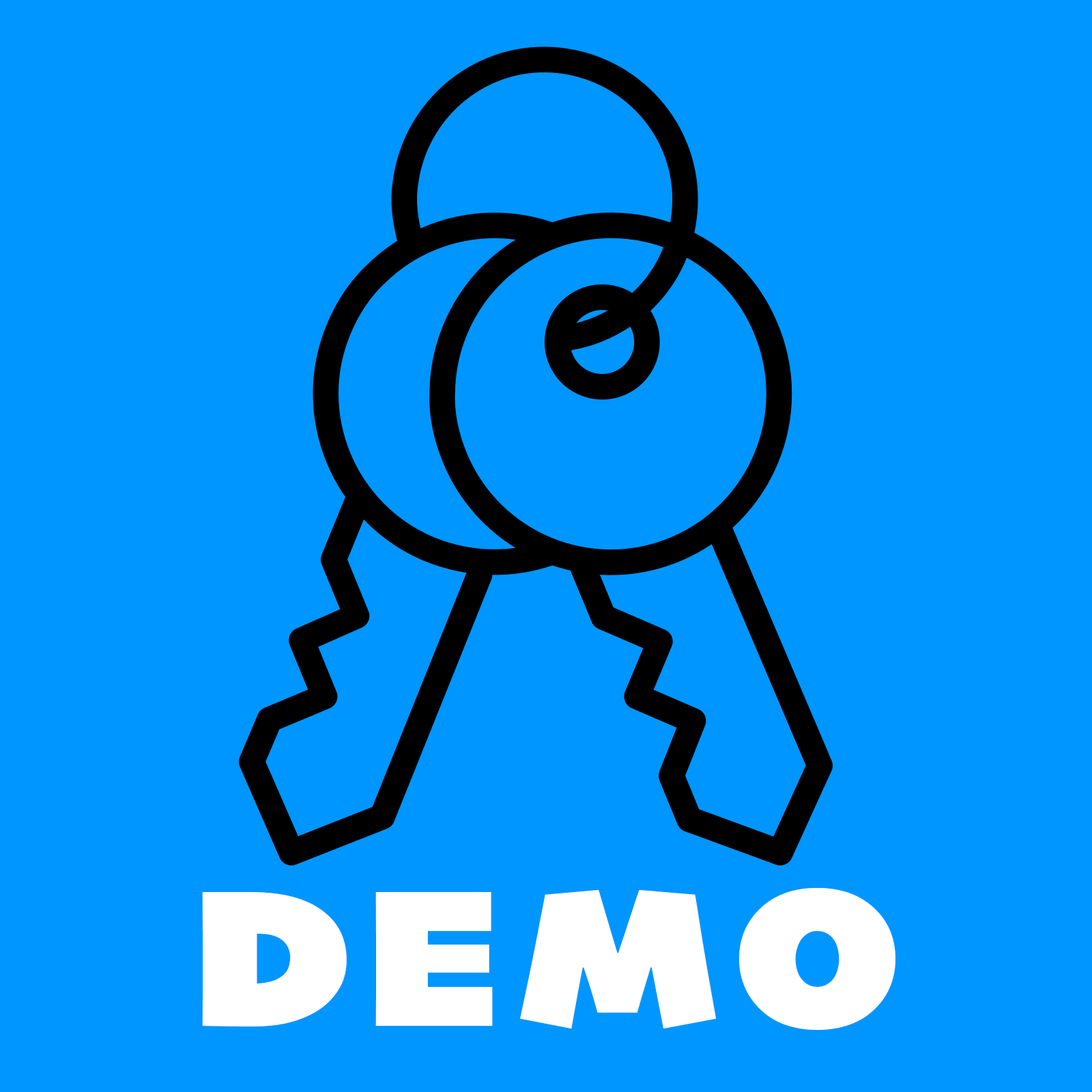
<style>
.page{position:relative;width:1092px;height:1092px;background:#0096ff}
.page>*{position:absolute;margin:0}
.t1{font:204.7px "Skia-Black";letter-spacing:0.1em;color:#ffffff}
</style>
<div class="page">
<p class="t1" style="left:202px;top:888px;width:693px;height:142px">DEMO</p>
</div>
